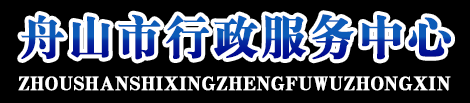
<style>
.page{position:relative;width:470px;height:103px;background:#000000}
.page>*{position:absolute;margin:0}
.t1{font:47.2px "HYa9gj";font-weight:bold}
.t2{font:19.4px "HYa9gj";color:#ffffff;font-weight:bold}
</style>
<div class="page">
<p class="t1" style="left:21px;top:14px;width:430px;height:46px">舟山市行政服务中心</p>
<p class="t2" style="left:18px;top:76px;width:433px;height:15px">ZHOUSHANSHIXINGZHENGFUWUZHONGXIN</p>
</div>
